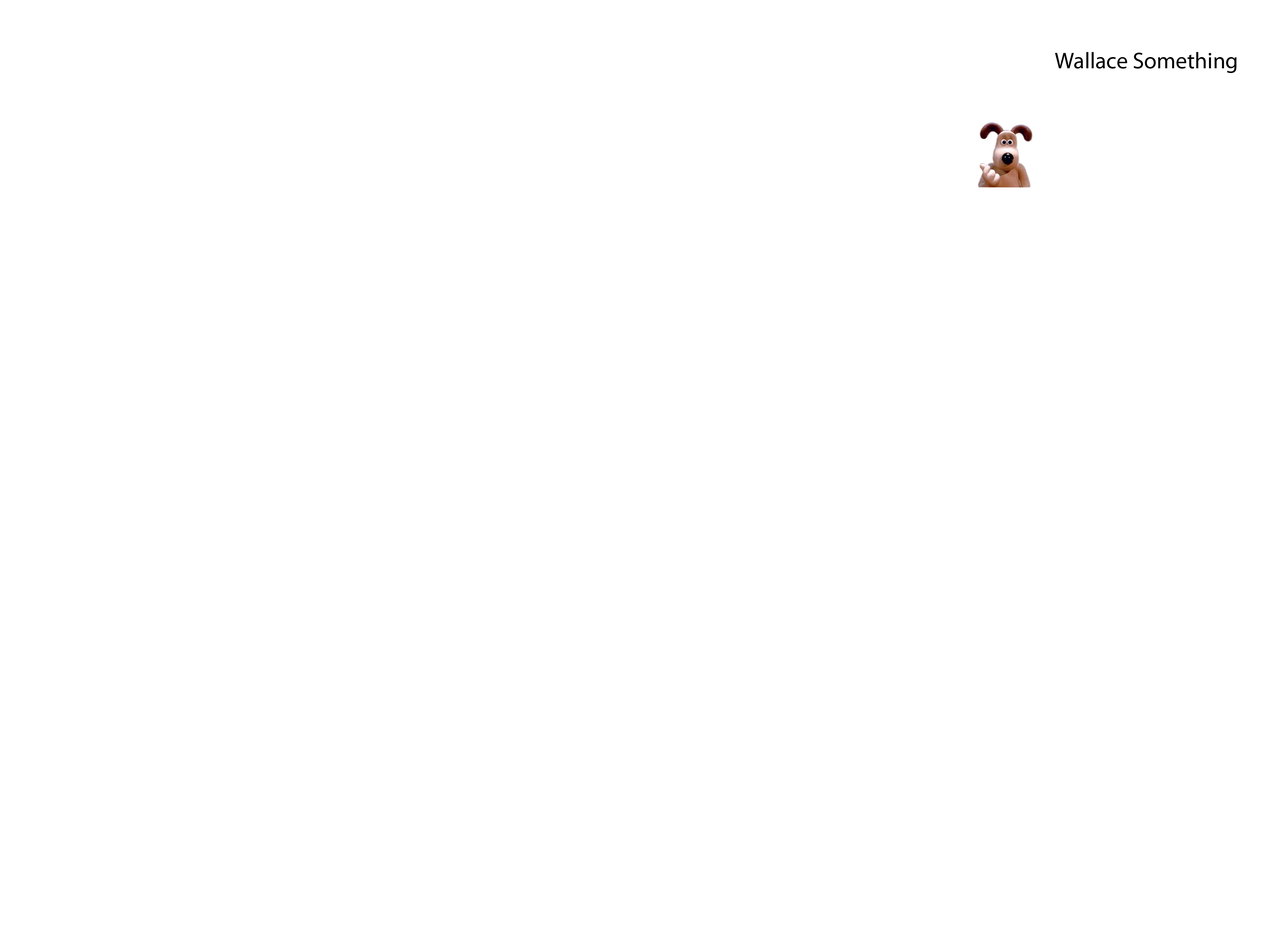
<style>
.page{position:relative;width:1261px;height:946px;background:#ffffff}
.page>*{position:absolute;margin:0}
.t1{font:22.8px "MyriadPro-Regular";color:#000000}
</style>
<div class="page">
<p class="t1" style="left:1055px;top:52px;width:181px;height:21px">Wallace Something</p>
</div>
